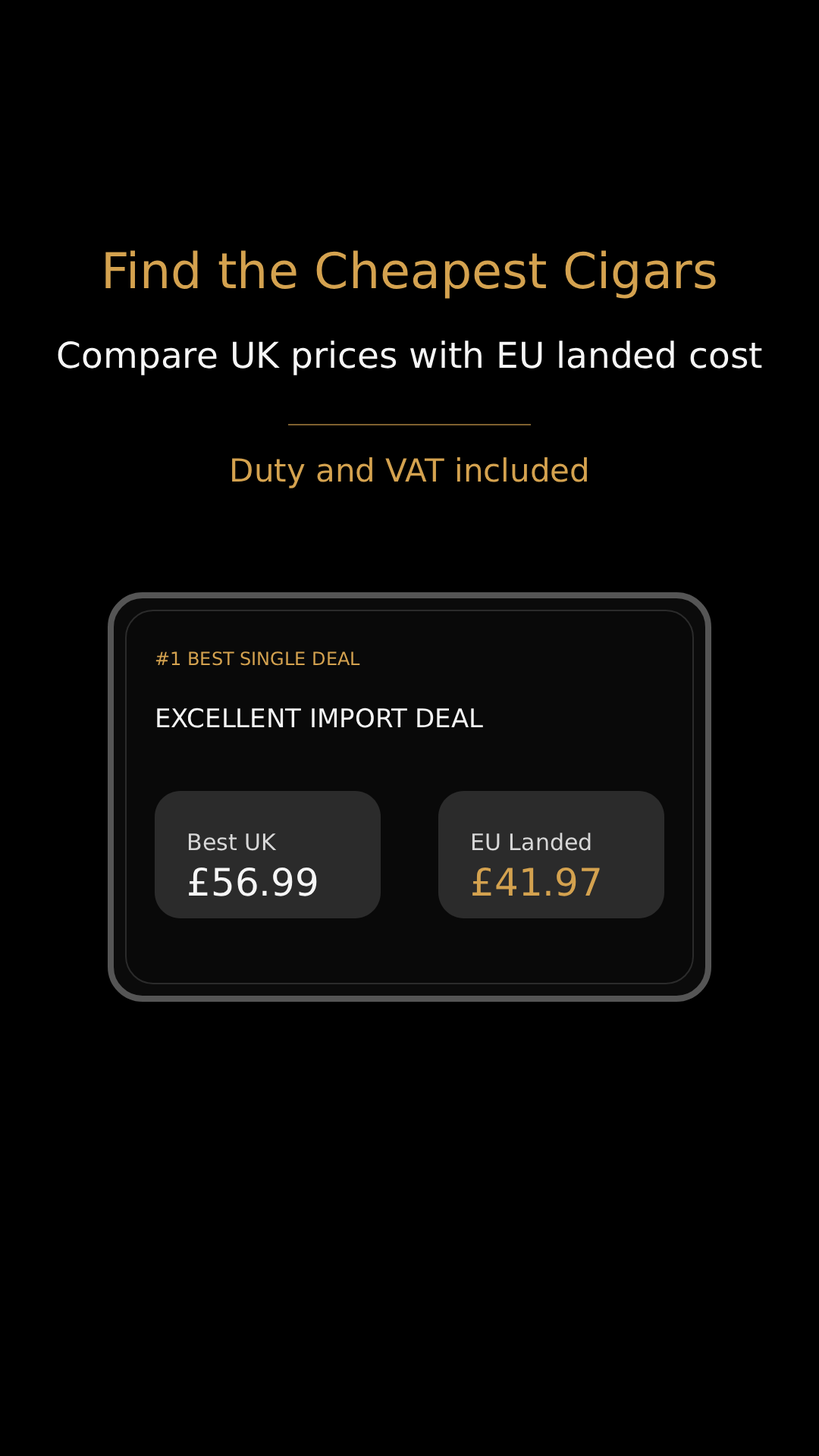
<style>
.page{position:relative;width:819px;height:1456px;background:#000000}
.page>*{position:absolute;margin:0}
.t1{font:49.3px "Arial";color:#d4a24f}
.t2{font:35.6px "Arial";color:#f6f6f6}
.t3{font:31.8px "Arial";color:#d4a24f}
.t4{font:18.2px "Arial";color:#d4a24f}
.t5{font:25.8px "Arial";color:#f6f6f6}
.t6{font:22.7px "Arial";color:#d8d8d8}
.t7{font:37.9px "Arial";color:#f6f6f6}
.t8{font:37.9px "Arial";color:#d4a24f}
</style>
<div class="page">
<p class="t1" style="left:105px;top:250px;width:611px;height:49px">Find the Cheapest Cigars</p>
<p class="t2" style="left:58px;top:340px;width:704px;height:35px">Compare UK prices with EU landed cost</p>
<p class="t3" style="left:232px;top:457px;width:355px;height:31px">Duty and VAT included</p>
<p class="t4" style="left:155px;top:651px;width:205px;height:15px">#1 BEST SINGLE DEAL</p>
<p class="t5" style="left:157px;top:708px;width:326px;height:20px">EXCELLENT IMPORT DEAL</p>
<p class="t6" style="left:188px;top:833px;width:89px;height:18px">Best UK</p>
<p class="t6" style="left:472px;top:833px;width:119px;height:18px">EU Landed</p>
<p class="t7" style="left:189px;top:867px;width:128px;height:29px">£56.99</p>
<p class="t8" style="left:472px;top:867px;width:128px;height:29px">£41.97</p>
</div>
